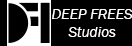
<style>
.page{position:relative;width:132px;height:46px;background:#000000}
.page>*{position:absolute;margin:0}
.t1{font:15px "FranklinGothic-BookItalic";color:#ffffff}
</style>
<div class="page">
<p class="t1" style="left:52px;top:9px;width:81px;height:28px;text-align:center">DEEP FREES<br>Studios</p>
</div>
